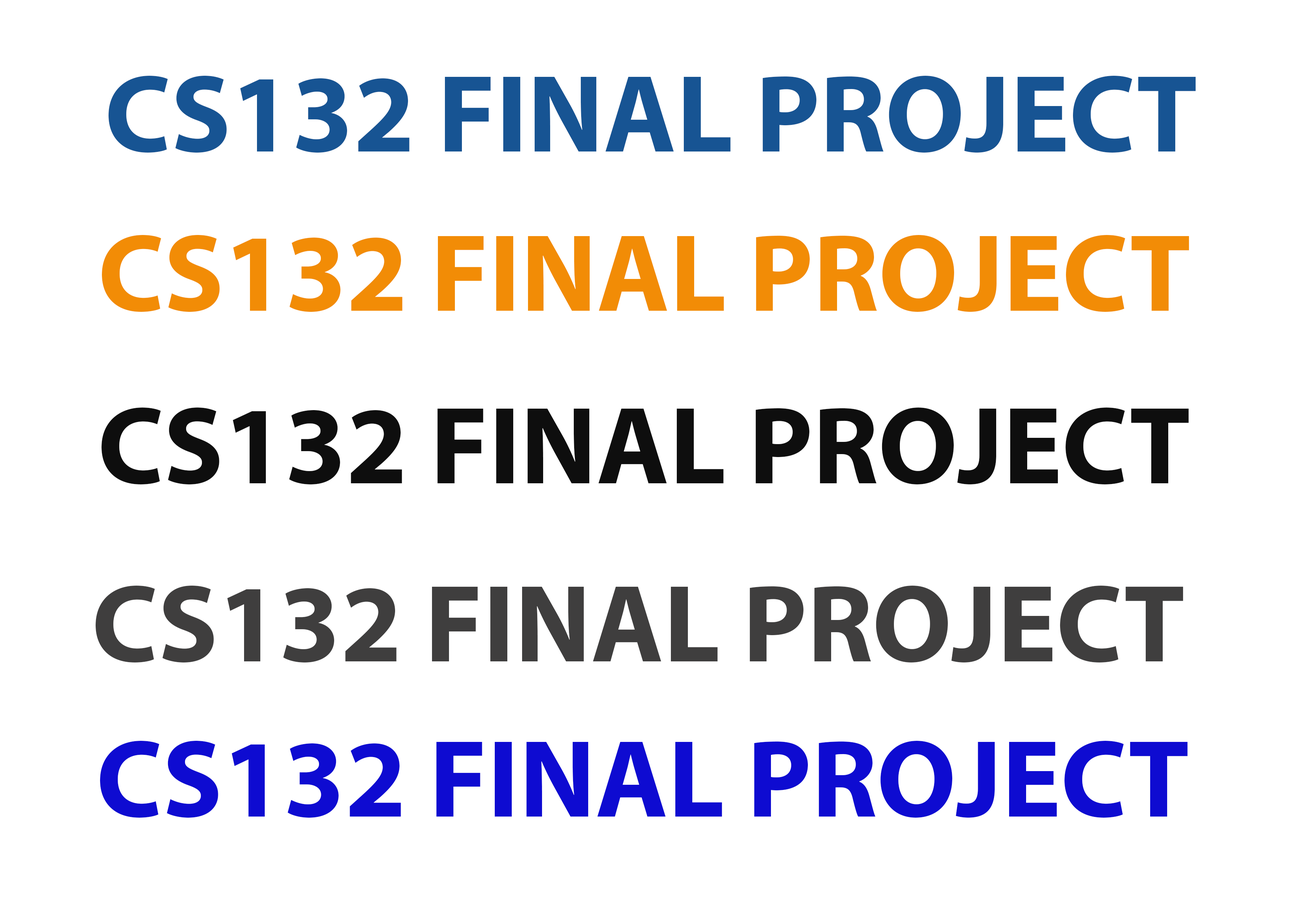
<style>
.page{position:relative;width:1296px;height:920px;background:#ffffff}
.page>*{position:absolute;margin:0}
.t1{font:110.8px "MyriadPro-Bold";color:#175493}
.t2{font:110.8px "MyriadPro-Bold";color:#f28c06}
.t3{font:110.8px "MyriadPro-Bold";color:#0e0e0e}
.t4{font:110.8px "MyriadPro-Bold";color:#3f3e3e}
.t5{font:110.8px "MyriadPro-Bold";color:#0e0bd1}
</style>
<div class="page">
<p class="t1" style="left:109px;top:76px;width:1087px;height:77px">CS132 FINAL PROJECT</p>
<p class="t2" style="left:102px;top:235px;width:1088px;height:77px">CS132 FINAL PROJECT</p>
<p class="t3" style="left:102px;top:407px;width:1087px;height:77px">CS132 FINAL PROJECT</p>
<p class="t4" style="left:96px;top:585px;width:1088px;height:77px">CS132 FINAL PROJECT</p>
<p class="t5" style="left:100px;top:741px;width:1088px;height:76px">CS132 FINAL PROJECT</p>
</div>
